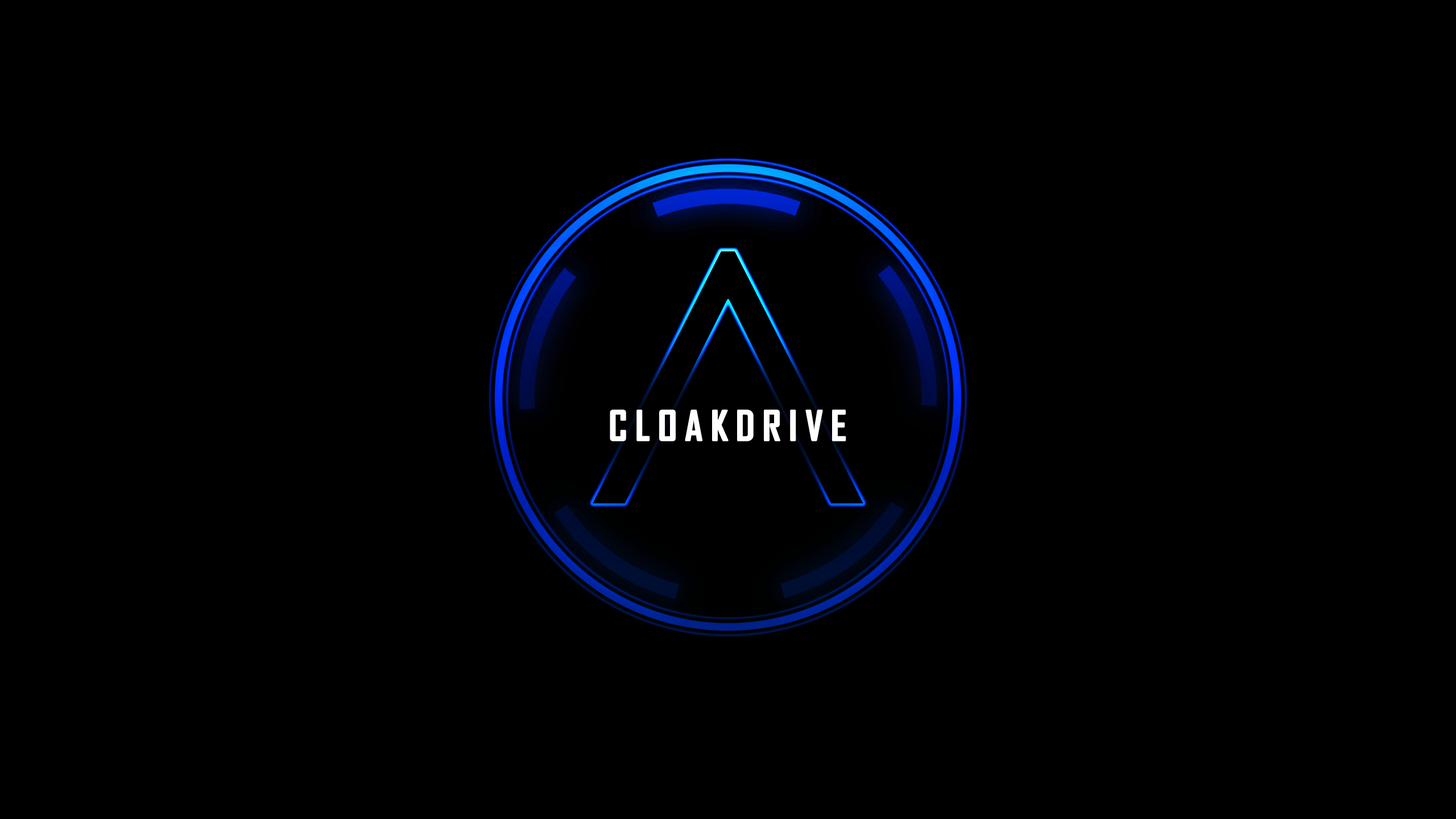
<style>
.page{position:relative;width:1456px;height:819px;background:#000000}
.page>*{position:absolute;margin:0}
.t1{font:39.8px "AgencyFB-Bold";letter-spacing:0.2em;color:#ffffff}
</style>
<div class="page">
<p class="t1" style="left:610px;top:410px;width:236px;height:31px">CLOAKDRIVE</p>
<p class="t1" style="left:610px;top:410px;width:236px;height:31px">CLOAKDRIVE</p>
</div>
